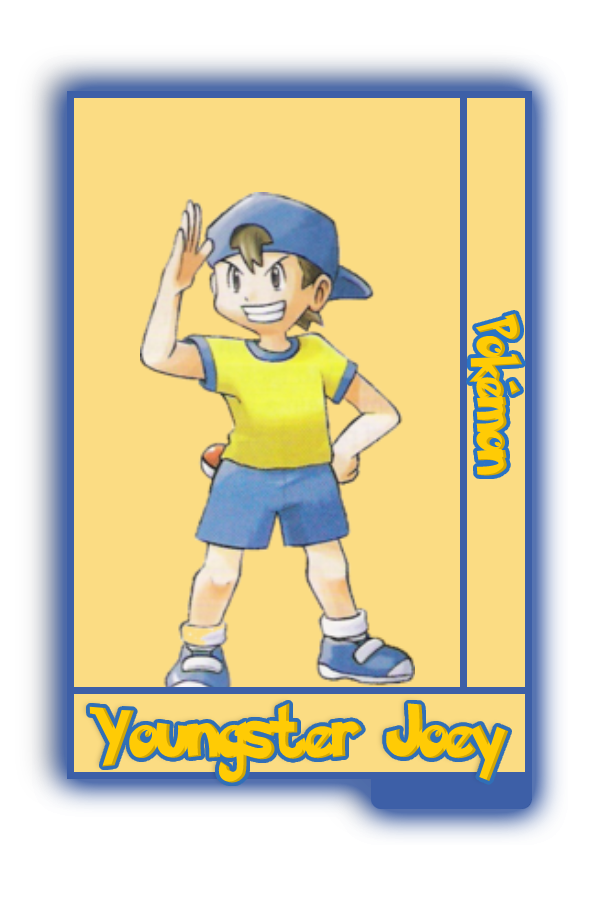
<style>
.page{position:relative;width:600px;height:900px;background:#fbdc83}
.page>*{position:absolute;margin:0}
.t1{font:48.8px "PokemonSolidNormal";color:#ffcb05;scale:0.8 1}
.t2{font:56.6px "PokemonSolidNormal";color:#ffcb05;scale:0.92 1}
</style>
<div class="page">
<p class="t1" style="left:469px;top:313px;width:54px;height:163px;rotate:90deg">Pokémon</p>
<p class="t2" style="left:89px;top:703px;width:420px;height:80px">Youngster Joey</p>
</div>
